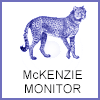
<style>
.page{position:relative;width:100px;height:100px;background:#ffffff}
.page>*{position:absolute;margin:0}
.t1{font:12px "ArialMT";letter-spacing:0.01em;color:#000000}
</style>
<div class="page">
<p class="t1" style="left:23px;top:70px;width:59px;height:24px;text-align:center">McKENZIE<br>MONITOR</p>
</div>
